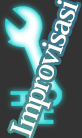
<style>
.page{position:relative;width:82px;height:138px;background:#333333}
.page>*{position:absolute;margin:0}
.t1{font:30px "HeiseiMinStd-W7";letter-spacing:-0.04em;color:#fffef9}
</style>
<div class="page">
<p class="t1" style="left:10px;top:0px;width:69px;height:138px;rotate:-70deg">Improvisasi</p>
</div>
